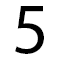
<style>
.page{position:relative;width:60px;height:60px;background:#ffffff}
.page>*{position:absolute;margin:0}
.t1{font:72px "MyriadPro-Regular";color:#000000}
</style>
<div class="page">
<p class="t1" style="left:15px;top:6px;width:29px;height:48px">5</p>
</div>
